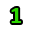
<style>
.page{position:relative;width:32px;height:32px;background:#ffffff}
.page>*{position:absolute;margin:0}
.t1{font:24px "Calibri-Bold";color:#2dd500}
</style>
<div class="page">
<p class="t1" style="left:11px;top:8px;width:10px;height:15px">1</p>
</div>
